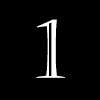
<style>
.page{position:relative;width:100px;height:100px;background:#000000}
.page>*{position:absolute;margin:0}
.t1{font:80px "Castellar";color:#ffffff}
</style>
<div class="page">
<p class="t1" style="left:36px;top:19px;width:29px;height:59px">1</p>
</div>
